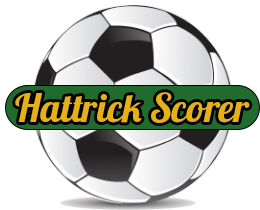
<style>
.page{position:relative;width:260px;height:210px;background:#ffffff}
.page>*{position:absolute;margin:0}
.t1{font:39.3px "Lobster1.4";color:#e6b018}
</style>
<div class="page">
<p class="t1" style="left:15px;top:92px;width:235px;height:31px">Hattrick Scorer</p>
</div>
